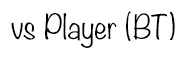
<style>
.page{position:relative;width:186px;height:59px;background:#ffffff}
.page>*{position:absolute;margin:0}
.t1{font:30px "Noteworthy-Light";color:#000000}
</style>
<div class="page">
<p class="t1" style="left:11px;top:11px;width:164px;height:37px">vs Player (BT)</p>
</div>
